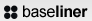
<style>
.page{position:relative;width:92px;height:21px}
.page>*{position:absolute;margin:0}
.t1{font:16px "Arial-BoldMT";letter-spacing:-0.025em;color:#000000}
.t2{font:16px "ArialMT";letter-spacing:-0.025em;color:#000000}
</style>
<div class="page">
<p class="t1" style="left:23px;top:5px;width:65px;height:13px"><span class="t2">base</span>liner</p>
</div>
